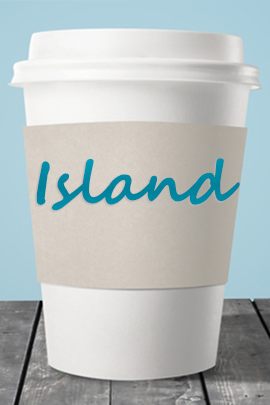
<style>
.page{position:relative;width:270px;height:405px}
.page>*{position:absolute;margin:0}
.t1{font:60px "SegoeScript-Bold";color:#0286a0}
.t2{font:36px "MyriadPro-Regular";color:#0286a0}
</style>
<div class="page">
<p class="t1" style="left:36px;top:158px;width:204px;height:53px"><span class="t2">      </span>Island</p>
</div>
